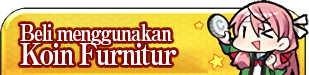
<style>
.page{position:relative;width:309px;height:75px}
.page>*{position:absolute;margin:0}
.t1{font:22px/17px "RyuminPro-ExBold";letter-spacing:-0.08em;color:#fffefd;scale:0.9 1}
.t2{font:30px/17px "RyuminPro-ExBold";letter-spacing:-0.08em;color:#fffefd;scale:0.9 1}
</style>
<div class="page">
<p class="t1" style="left:20px;top:24px;width:157px;height:41px">Beli menggunakan <br><span class="t2">Koin Furnitur</span></p>
</div>
